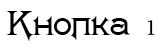
<style>
.page{position:relative;width:160px;height:50px;background:#ffffff}
.page>*{position:absolute;margin:0}
.t1{font:24px "Washington";color:#000000}
.t2{font:24px "MinionPro-Regular";color:#000000}
</style>
<div class="page">
<p class="t1" style="left:7px;top:11px;width:148px;height:30px">Кнопка <span class="t2">1</span></p>
</div>
